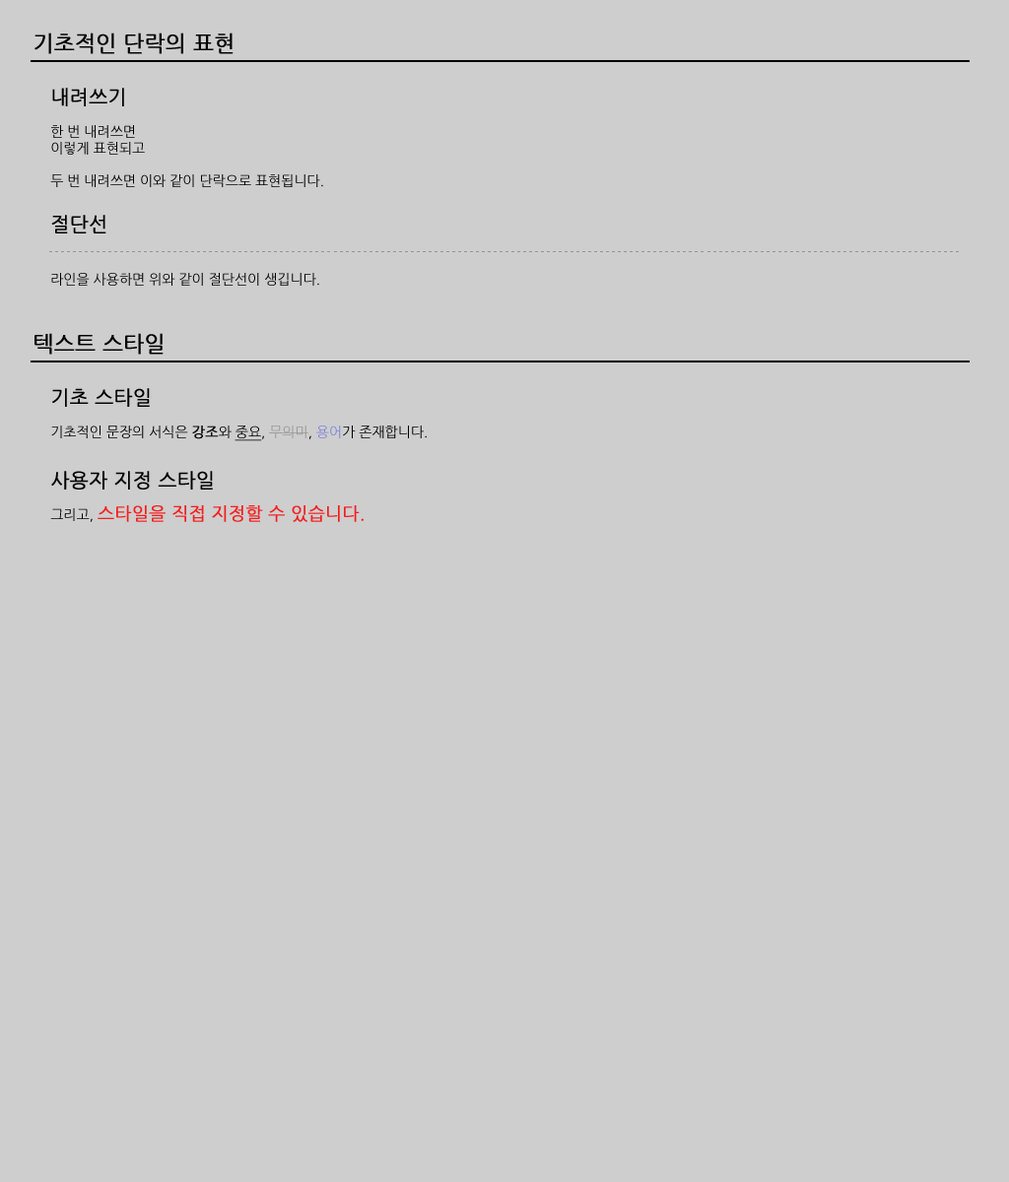
<style>
.page{position:relative;width:1009px;height:1182px;background:#cecece}
.page>*{position:absolute;margin:0}
.t1{font:21.7px "NanumGothic";color:#000000;font-weight:bold}
.t2{font:19.7px "NanumGothic";color:#000000;font-weight:bold}
.t3{font:13.8px "NanumGothic";color:#000000}
.t4{font:13.8px "NanumGothic";color:#000000;font-weight:bold}
.t5{font:13.8px "NanumGothic";color:#000000;text-decoration:underline}
.t6{font:13.8px "NanumGothic";color:#989898}
.t7{font:13.8px "NanumGothic";color:#7d85d7}
.t8{font:17.7px "NanumGothic";color:#f41f1f;font-weight:bold}
</style>
<div class="page">
<p class="t1" style="left:34px;top:33px;width:199px;height:21px">기초적인 단락의 표현</p>
<p class="t2" style="left:52px;top:88px;width:72px;height:18px">내려쓰기</p>
<p class="t3" style="left:50px;top:125px;width:273px;height:62px">한 번 내려쓰면<br>이렇게 표현되고<br><br>두 번 내려쓰면 이와 같이 단락으로 표현됩니다.</p>
<p class="t2" style="left:51px;top:215px;width:55px;height:18px">절단선</p>
<p class="t3" style="left:51px;top:273px;width:268px;height:13px">라인을 사용하면 위와 같이 절단선이 생깁니다.</p>
<p class="t1" style="left:34px;top:333px;width:130px;height:22px">텍스트 스타일</p>
<p class="t2" style="left:52px;top:388px;width:98px;height:19px">기초 스타일</p>
<p class="t3" style="left:51px;top:426px;width:376px;height:15px">기초적인 문장의 서식은 <span class="t4">강조</span>와 <span class="t5">중요</span>, <span class="t6">무의미</span>, <span class="t7">용어</span>가 존재합니다.</p>
<p class="t2" style="left:51px;top:471px;width:162px;height:19px">사용자 지정 스타일</p>
<p class="t8" style="left:50px;top:505px;width:313px;height:17px"><span class="t3">그리고, </span>스타일을 직접 지정할 수 있습니다.</p>
</div>
